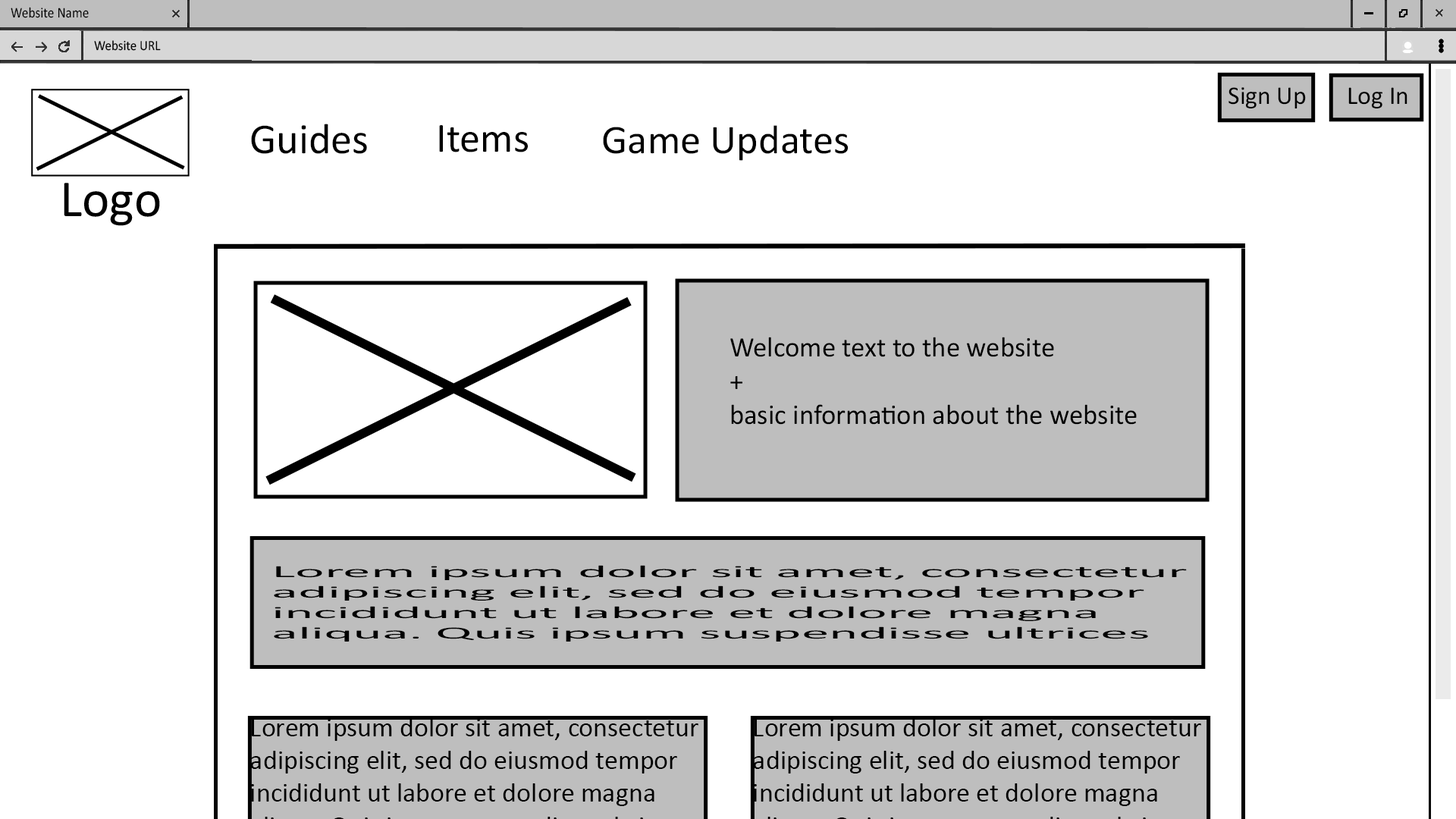
<style>
.page{position:relative;width:1456px;height:819px;background:#ffffff}
.page>*{position:absolute;margin:0}
.t1{font:14.8px "Calibri";color:#000000;scale:0.89 1}
.t2{font:14.1px "Calibri";color:#000000;scale:0.91 1}
.t3{font:43px "Calibri";color:#000000}
.t4{font:41.7px "Calibri";color:#000000}
.t5{font:41px "Calibri";color:#000000}
.t6{font:28.2px "Calibri";color:#000000}
.t7{font:17px "Calibri";color:#000000;scale:3.27 1}
</style>
<div class="page">
<p class="t1" style="left:11px;top:7px;width:78px;height:11px">Website Name</p>
<p class="t2" style="left:94px;top:40px;width:67px;height:11px">Website URL</p>
<p class="t3" style="left:251px;top:124px;width:116px;height:30px">Guides</p>
<p class="t4" style="left:439px;top:125px;width:89px;height:27px">Items</p>
<p class="t5" style="left:603px;top:125px;width:245px;height:36px">Game Updates</p>
<p class="t6" style="left:730px;top:337px;width:407px;height:88px">Welcome text to the website <br>+<br>basic information about the website</p>
<p class="t7" style="left:274px;top:565px;width:913px;height:77px">Lorem ipsum dolor sit amet, consectetur adipiscing elit, sed do eiusmod tempor incididunt ut labore et dolore magna aliqua. Quis ipsum suspendisse ultrices gravida. Risus commodo viverra maecenas accumsan lacus vel facilisis.</p>
</div>
